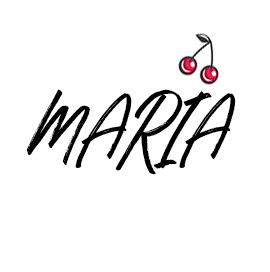
<style>
.page{position:relative;width:270px;height:272px;background:#ffffff}
.page>*{position:absolute;margin:0}
.t1{font:71.1px "TakeEasyDEMO";color:#000000;font-style:italic}
</style>
<div class="page">
<p class="t1" style="left:27px;top:89px;width:209px;height:86px">MARIA</p>
</div>
